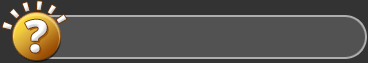
<style>
.page{position:relative;width:368px;height:63px;background:#525252}
.page>*{position:absolute;margin:0}
.t1{font:11.1px/87px "OpenSans-Extrabold";letter-spacing:0.35em;color:#ffffff}
.t2{font:44.4px "OpenSans-Extrabold";color:#ffffff}
</style>
<div class="page">
<p class="t1" style="left:2px;top:1px;width:64px;height:29px;text-align:center">llllll</p>
<p class="t2" style="left:25px;top:19px;width:22px;height:34px">?</p>
</div>
